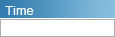
<style>
.page{position:relative;width:115px;height:37px;background:#ffffff}
.page>*{position:absolute;margin:0}
.t1{font:14px "Latha";color:#ffffff}
</style>
<div class="page">
<p class="t1" style="left:5px;top:6px;width:29px;height:9px">Time</p>
</div>
